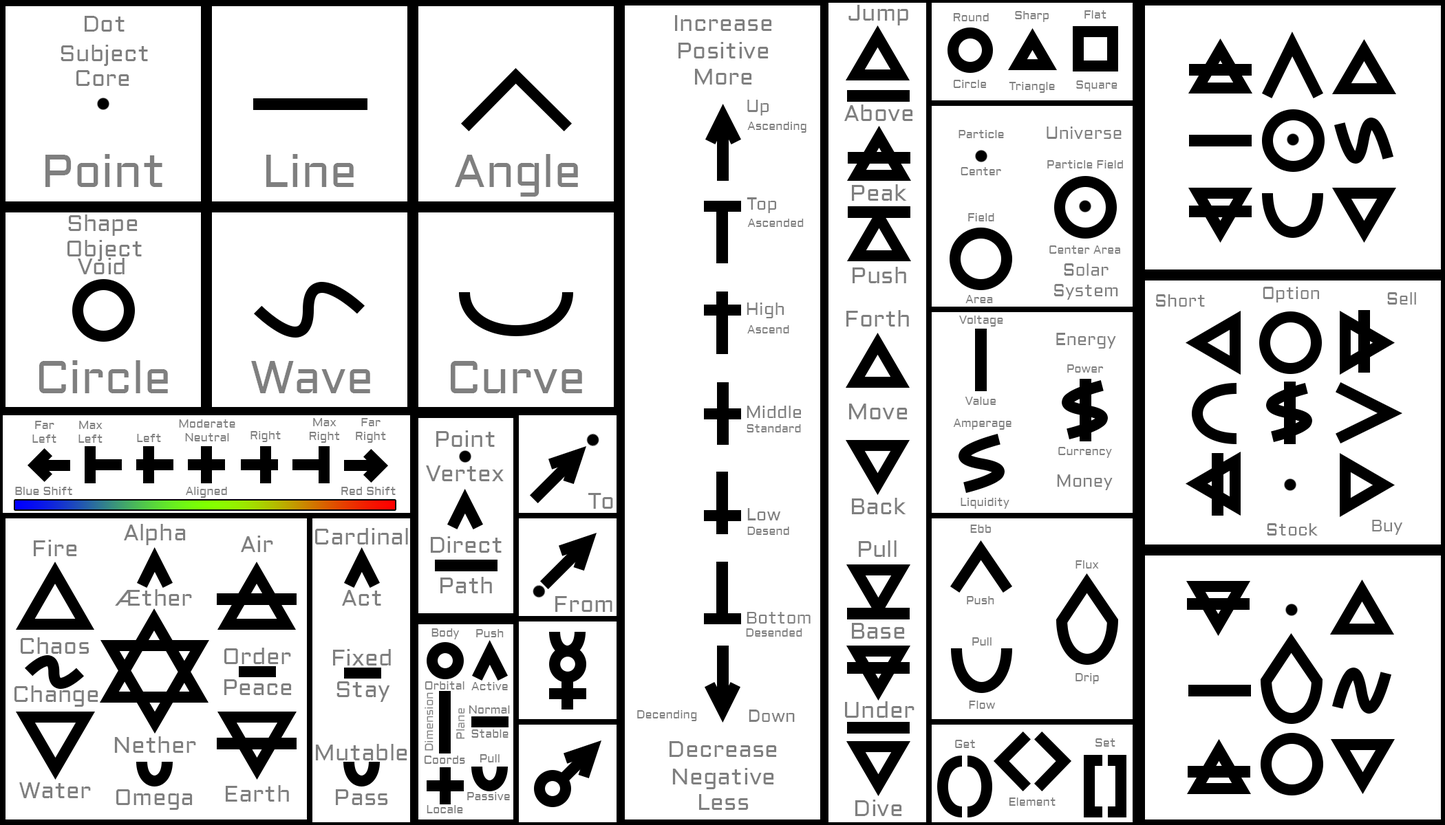
<style>
.page{position:relative;width:1445px;height:825px;background:#ffffff}
.page>*{position:absolute;margin:0}
.t1{font:22.9px "Aldrich-Regular";color:#7f7f7f}
.t2{font:11.5px "Aldrich-Regular";color:#7f7f7f}
.t3{font:17.2px "Aldrich-Regular";color:#7f7f7f}
.t4{font:45.9px "Aldrich-Regular";color:#7f7f7f}
</style>
<div class="page">
<p class="t1" style="left:848px;top:5px;width:60px;height:20px">Jump</p>
<p class="t1" style="left:85px;top:16px;width:40px;height:16px">Dot</p>
<p class="t1" style="left:675px;top:15px;width:97px;height:16px">Increase</p>
<p class="t2" style="left:953px;top:13px;width:35px;height:8px">Round</p>
<p class="t2" style="left:1015px;top:11px;width:33px;height:11px">Sharp</p>
<p class="t2" style="left:1084px;top:10px;width:22px;height:9px">Flat</p>
<p class="t1" style="left:678px;top:42px;width:90px;height:16px">Positive</p>
<p class="t1" style="left:61px;top:45px;width:87px;height:21px">Subject</p>
<p class="t1" style="left:76px;top:70px;width:53px;height:16px">Core</p>
<p class="t1" style="left:695px;top:69px;width:57px;height:16px">More</p>
<p class="t2" style="left:953px;top:80px;width:33px;height:8px">Circle</p>
<p class="t2" style="left:1008px;top:82px;width:47px;height:11px">Triangle</p>
<p class="t2" style="left:1076px;top:80px;width:41px;height:11px">Square</p>
<p class="t3" style="left:747px;top:100px;width:21px;height:16px">Up</p>
<p class="t1" style="left:844px;top:105px;width:69px;height:16px">Above</p>
<p class="t2" style="left:747px;top:122px;width:59px;height:11px">Ascending</p>
<p class="t2" style="left:958px;top:130px;width:46px;height:8px">Particle</p>
<p class="t3" style="left:1046px;top:127px;width:75px;height:12px">Universe</p>
<p class="t4" style="left:45px;top:154px;width:117px;height:33px">Point</p>
<p class="t4" style="left:266px;top:154px;width:88px;height:33px">Line</p>
<p class="t4" style="left:455px;top:154px;width:123px;height:43px">Angle</p>
<p class="t2" style="left:1047px;top:160px;width:76px;height:9px">Particle Field</p>
<p class="t2" style="left:960px;top:167px;width:41px;height:8px">Center</p>
<p class="t1" style="left:852px;top:184px;width:55px;height:17px">Peak</p>
<p class="t3" style="left:746px;top:197px;width:30px;height:16px">Top</p>
<p class="t1" style="left:68px;top:215px;width:70px;height:21px">Shape</p>
<p class="t2" style="left:747px;top:219px;width:56px;height:8px">Ascended</p>
<p class="t2" style="left:968px;top:213px;width:26px;height:8px">Field</p>
<p class="t1" style="left:67px;top:240px;width:75px;height:21px">Object</p>
<p class="t2" style="left:1049px;top:246px;width:71px;height:8px">Center Area</p>
<p class="t1" style="left:78px;top:258px;width:47px;height:16px">Void</p>
<p class="t1" style="left:852px;top:267px;width:54px;height:16px">Push</p>
<p class="t3" style="left:1054px;top:263px;width:64px;height:37px;text-align:center">Solar<br>System</p>
<p class="t3" style="left:1262px;top:287px;width:57px;height:16px">Option</p>
<p class="t3" style="left:1387px;top:292px;width:29px;height:13px">Sell</p>
<p class="t3" style="left:746px;top:303px;width:38px;height:15px">High</p>
<p class="t2" style="left:965px;top:295px;width:28px;height:8px">Area</p>
<p class="t3" style="left:1156px;top:294px;width:48px;height:13px">Short</p>
<p class="t1" style="left:846px;top:310px;width:63px;height:17px">Forth</p>
<p class="t2" style="left:959px;top:316px;width:44px;height:11px">Voltage</p>
<p class="t2" style="left:747px;top:325px;width:42px;height:9px">Ascend</p>
<p class="t3" style="left:1056px;top:333px;width:60px;height:16px">Energy</p>
<p class="t4" style="left:39px;top:360px;width:129px;height:33px">Circle</p>
<p class="t4" style="left:251px;top:361px;width:119px;height:32px">Wave</p>
<p class="t4" style="left:451px;top:361px;width:131px;height:32px">Curve</p>
<p class="t2" style="left:1067px;top:365px;width:36px;height:8px">Power</p>
<p class="t2" style="left:964px;top:397px;width:31px;height:8px">Value</p>
<p class="t3" style="left:746px;top:406px;width:55px;height:12px">Middle</p>
<p class="t1" style="left:849px;top:404px;width:58px;height:16px">Move</p>
<p class="t2" style="left:32px;top:421px;width:24px;height:22px;text-align:center">Far<br>Left</p>
<p class="t2" style="left:78px;top:421px;width:24px;height:22px;text-align:center">Max<br>Left</p>
<p class="t2" style="left:179px;top:420px;width:56px;height:22px;text-align:center">Moderate<br>Neutral</p>
<p class="t2" style="left:309px;top:418px;width:31px;height:25px;text-align:center">Max<br>Right</p>
<p class="t2" style="left:356px;top:418px;width:30px;height:25px;text-align:center">Far<br>Right</p>
<p class="t2" style="left:746px;top:424px;width:55px;height:9px">Standard</p>
<p class="t2" style="left:953px;top:419px;width:58px;height:11px">Amperage</p>
<p class="t2" style="left:137px;top:434px;width:24px;height:8px">Left</p>
<p class="t2" style="left:250px;top:431px;width:31px;height:11px">Right</p>
<p class="t1" style="left:436px;top:431px;width:59px;height:16px">Point</p>
<p class="t2" style="left:1058px;top:447px;width:54px;height:11px">Currency</p>
<p class="t1" style="left:426px;top:466px;width:78px;height:16px">Vertex</p>
<p class="t3" style="left:1057px;top:475px;width:55px;height:15px">Money</p>
<p class="t2" style="left:15px;top:487px;width:57px;height:8px">Blue Shift</p>
<p class="t2" style="left:186px;top:487px;width:41px;height:11px">Aligned</p>
<p class="t2" style="left:341px;top:487px;width:55px;height:8px">Red Shift</p>
<p class="t1" style="left:588px;top:493px;width:25px;height:16px">To</p>
<p class="t3" style="left:747px;top:508px;width:34px;height:13px">Low</p>
<p class="t1" style="left:852px;top:498px;width:54px;height:17px">Back</p>
<p class="t2" style="left:960px;top:498px;width:49px;height:11px">Liquidity</p>
<p class="t3" style="left:1372px;top:520px;width:31px;height:15px">Buy</p>
<p class="t1" style="left:124px;top:524px;width:62px;height:21px">Alpha</p>
<p class="t1" style="left:315px;top:528px;width:93px;height:17px">Cardinal</p>
<p class="t2" style="left:747px;top:527px;width:42px;height:8px">Desend</p>
<p class="t2" style="left:970px;top:525px;width:21px;height:8px">Ebb</p>
<p class="t3" style="left:1266px;top:523px;width:51px;height:13px">Stock</p>
<p class="t1" style="left:34px;top:540px;width:43px;height:17px">Fire</p>
<p class="t1" style="left:241px;top:536px;width:32px;height:16px">Air</p>
<p class="t1" style="left:431px;top:537px;width:70px;height:16px">Direct</p>
<p class="t1" style="left:858px;top:541px;width:38px;height:16px">Pull</p>
<p class="t2" style="left:1075px;top:561px;width:24px;height:8px">Flux</p>
<p class="t1" style="left:440px;top:577px;width:52px;height:17px">Path</p>
<p class="t1" style="left:115px;top:590px;width:77px;height:16px">Æther</p>
<p class="t1" style="left:342px;top:590px;width:39px;height:16px">Act</p>
<p class="t1" style="left:555px;top:596px;width:57px;height:16px">From</p>
<p class="t2" style="left:966px;top:596px;width:28px;height:9px">Push</p>
<p class="t3" style="left:746px;top:612px;width:64px;height:12px">Bottom</p>
<p class="t2" style="left:431px;top:629px;width:29px;height:11px">Body</p>
<p class="t2" style="left:476px;top:629px;width:28px;height:9px">Push</p>
<p class="t2" style="left:746px;top:629px;width:56px;height:8px">Desended</p>
<p class="t1" style="left:852px;top:623px;width:53px;height:16px">Base</p>
<p class="t1" style="left:21px;top:638px;width:68px;height:16px">Chaos</p>
<p class="t2" style="left:972px;top:638px;width:19px;height:8px">Pull</p>
<p class="t1" style="left:224px;top:648px;width:67px;height:16px">Order</p>
<p class="t1" style="left:333px;top:649px;width:58px;height:17px">Fixed</p>
<p class="t2" style="left:1075px;top:673px;width:24px;height:11px">Drip</p>
<p class="t1" style="left:14px;top:686px;width:84px;height:21px">Change</p>
<p class="t1" style="left:224px;top:680px;width:68px;height:15px">Peace</p>
<p class="t1" style="left:336px;top:682px;width:54px;height:20px">Stay</p>
<p class="t2" style="left:424px;top:682px;width:40px;height:8px">Orbital</p>
<p class="t2" style="left:471px;top:682px;width:37px;height:9px">Active</p>
<p class="t2" style="left:424px;top:693px;width:9px;height:58px;rotate:-90deg">Dimension</p>
<p class="t1" style="left:845px;top:702px;width:69px;height:16px">Under</p>
<p class="t2" style="left:969px;top:701px;width:26px;height:8px">Flow</p>
<p class="t2" style="left:455px;top:709px;width:10px;height:30px;rotate:-90deg">Plane</p>
<p class="t2" style="left:468px;top:706px;width:42px;height:8px">Normal</p>
<p class="t2" style="left:637px;top:711px;width:60px;height:11px">Decending</p>
<p class="t3" style="left:748px;top:710px;width:47px;height:12px">Down</p>
<p class="t1" style="left:114px;top:737px;width:82px;height:16px">Nether</p>
<p class="t2" style="left:471px;top:730px;width:37px;height:8px">Stable</p>
<p class="t1" style="left:316px;top:744px;width:91px;height:17px">Mutable</p>
<p class="t1" style="left:669px;top:742px;width:108px;height:15px">Decrease</p>
<p class="t2" style="left:955px;top:740px;width:20px;height:8px">Get</p>
<p class="t2" style="left:1095px;top:739px;width:20px;height:8px">Set</p>
<p class="t2" style="left:424px;top:756px;width:41px;height:8px">Coords</p>
<p class="t2" style="left:479px;top:755px;width:20px;height:8px">Pull</p>
<p class="t1" style="left:672px;top:768px;width:102px;height:22px">Negative</p>
<p class="t1" style="left:19px;top:783px;width:72px;height:16px">Water</p>
<p class="t1" style="left:226px;top:786px;width:63px;height:16px">Earth</p>
<p class="t1" style="left:116px;top:790px;width:77px;height:20px">Omega</p>
<p class="t1" style="left:336px;top:790px;width:52px;height:16px">Pass</p>
<p class="t2" style="left:467px;top:792px;width:43px;height:9px">Passive</p>
<p class="t1" style="left:699px;top:795px;width:49px;height:15px">Less</p>
<p class="t2" style="left:1008px;top:798px;width:47px;height:8px">Element</p>
<p class="t2" style="left:426px;top:806px;width:37px;height:8px">Locale</p>
<p class="t1" style="left:855px;top:800px;width:47px;height:17px">Dive</p>
</div>
